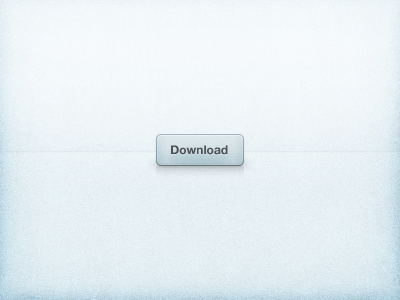
<style>
.page{position:relative;width:400px;height:300px}
.page>*{position:absolute;margin:0}
.t1{font:12px "HelveticaNeue-Bold";color:#4b5154}
</style>
<div class="page">
<p class="t1" style="left:171px;top:145px;width:57px;height:10px">Download</p>
</div>
